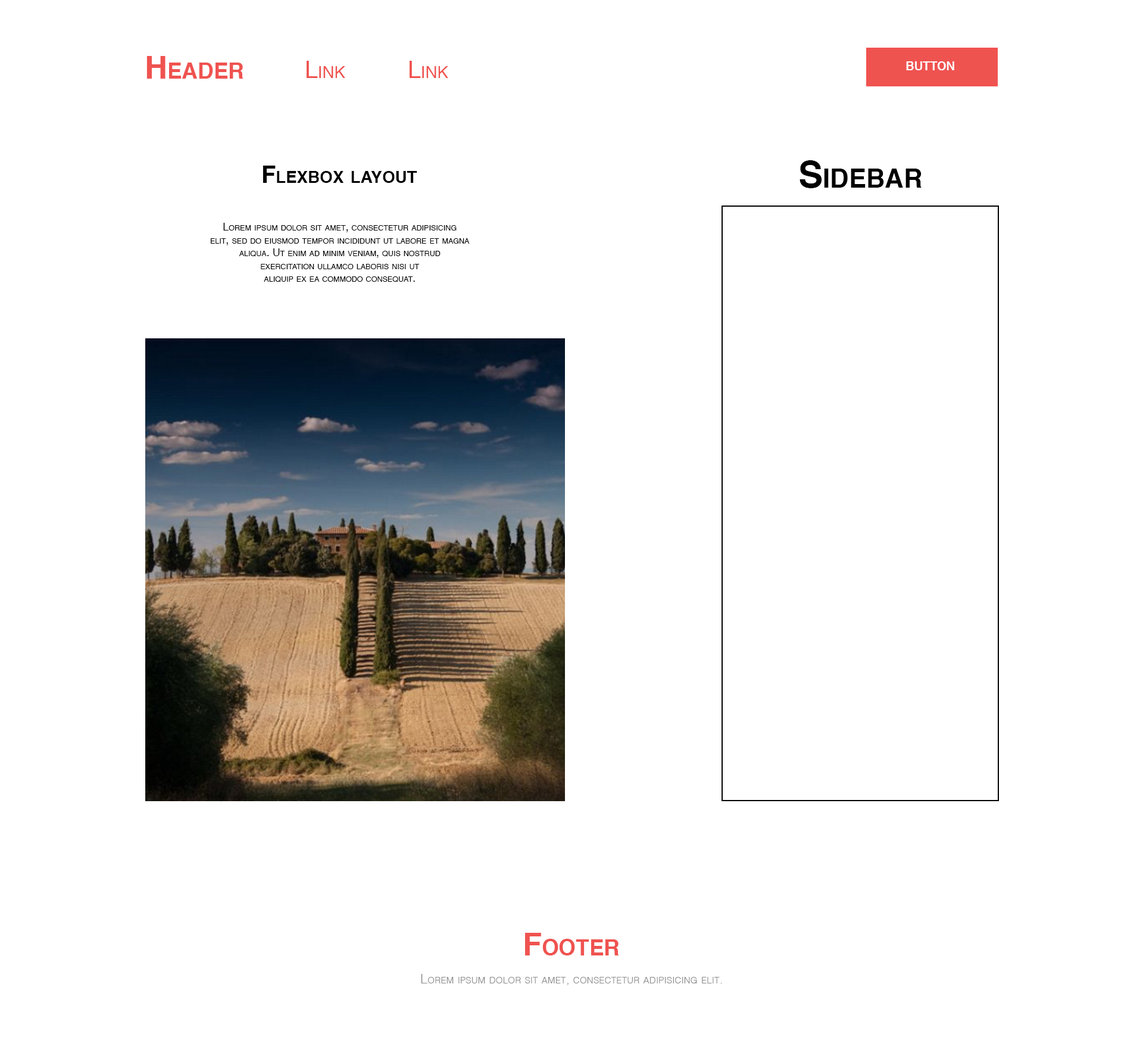
<style>
.page{position:relative;width:1143px;height:1043px;background:#ffffff}
.page>*{position:absolute;margin:0}
.t1{font:31.4px "Helvetica-Bold";color:#ef5350;font-variant:small-caps}
.t2{font:31.4px "Helvetica-Bold";color:#ef5350;text-transform:uppercase}
.t3{font:23.7px "Helvetica";color:#ef5350;font-variant:small-caps}
.t4{font:11.9px "Helvetica-Bold";color:#ffffff;font-variant:small-caps}
.t5{font:37px "Helvetica-Bold";color:#000000;font-variant:small-caps}
.t6{font:23.7px "Helvetica-Bold";color:#000000;font-variant:small-caps}
.t7{font:10.7px "Helvetica";color:#000000;font-variant:small-caps}
.t8{font:13.1px "Helvetica-Light";color:#8d8d8d;font-variant:small-caps}
</style>
<div class="page">
<p class="t1" style="left:147px;top:56px;width:97px;height:23px"><span class="t2">H</span>eader</p>
<p class="t3" style="left:307px;top:61px;width:38px;height:17px">Link</p>
<p class="t3" style="left:410px;top:61px;width:38px;height:17px">Link</p>
<p class="t4" style="left:906px;top:61px;width:49px;height:9px">BUTTON</p>
<p class="t5" style="left:800px;top:160px;width:122px;height:28px">Sidebar</p>
<p class="t6" style="left:263px;top:166px;width:154px;height:17px">Flexbox layout</p>
<p class="t7" style="left:211px;top:223px;width:259px;height:59px;text-align:center">Lorem ipsum dolor sit amet, consectetur adipisicing <br>elit, sed do eiusmod tempor incididunt ut labore et magna <br>aliqua. Ut enim ad minim veniam, quis nostrud <br>exercitation ullamco laboris nisi ut <br>aliquip ex ea commodo consequat.</p>
<p class="t1" style="left:525px;top:933px;width:94px;height:22px"><span class="t2">F</span>ooter</p>
<p class="t8" style="left:421px;top:974px;width:301px;height:11px">Lorem ipsum dolor sit amet, consectetur adipisicing elit.</p>
</div>
